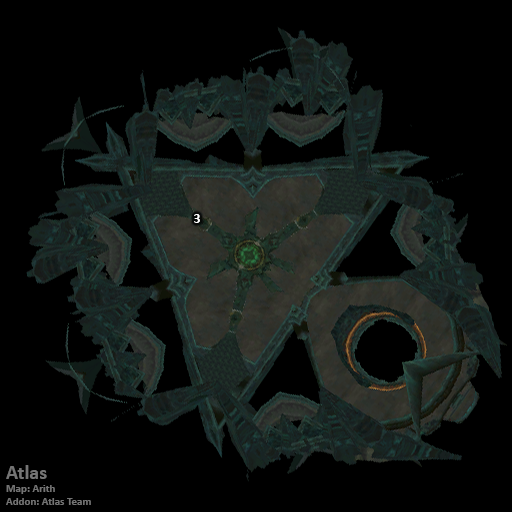
<style>
.page{position:relative;width:512px;height:512px;background:#000000}
.page>*{position:absolute;margin:0}
.t1{font:14px "Calibri-Bold";color:#ffffff}
.t2{font:11px "Calibri-Bold";color:#747474}
.t3{font:20px "Calibri-Bold";color:#747474}
</style>
<div class="page">
<p class="t1" style="left:194px;top:214px;width:6px;height:9px">3</p>
<p class="t2" style="left:6px;top:465px;width:85px;height:40px"><span class="t3">Atlas<br></span>Map: Arith<br>Addon: Atlas Team</p>
</div>
